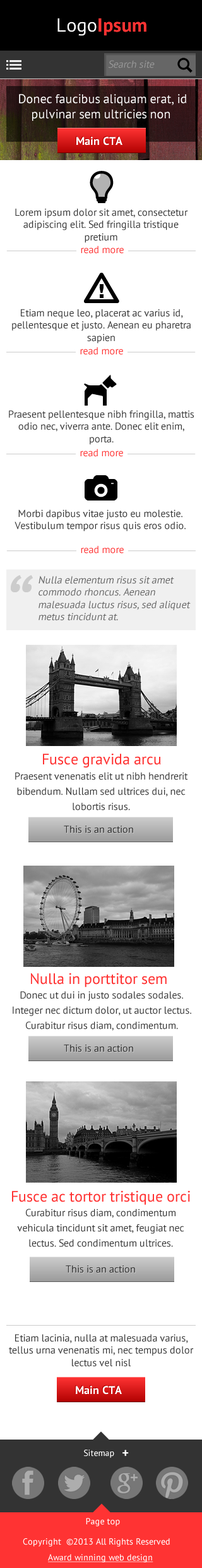
<style>
.page{position:relative;width:202px;height:1568px;background:#ffffff}
.page>*{position:absolute;margin:0}
.t1{font:10.1px "PTSans-Regular";color:#999999;font-style:italic}
.t2{font:12.7px/15.2px "PTSans-Regular";color:#ffffff}
.t3{font:10.1px/12.1px "PTSans-Regular";color:#333333}
.t4{font:10.1px "PTSans-Regular";color:#ff3333}
.t5{font:10.1px/12.1px "PTSans-Regular";color:#666666;font-style:italic}
.t6{font:15.2px "PTSans-Regular";color:#ff3333}
.t7{font:10.1px/15.2px "PTSans-Regular";color:#333333}
.t8{font:8.9px "PTSans-Regular";color:#ffffff}
.t9{font:8.9px "PTSans-Regular";color:#ffffff;text-decoration:underline}
</style>
<div class="page">
<p class="t1" style="left:108px;top:60px;width:47px;height:8px">Search site</p>
<p class="t2" style="left:19px;top:94px;width:168px;height:27px;text-align:center">Donec faucibus aliquam erat, id pulvinar sem ultricies non</p>
<p class="t3" style="left:15px;top:208px;width:174px;height:35px;text-align:center">Lorem ipsum dolor sit amet, consectetur adipiscing elit. Sed fringilla tristique pretium</p>
<p class="t4" style="left:81px;top:246px;width:43px;height:8px">read more</p>
<p class="t3" style="left:12px;top:309px;width:179px;height:35px;text-align:center">Etiam neque leo, placerat ac varius id, pellentesque et justo. Aenean eu pharetra sapien</p>
<p class="t4" style="left:80px;top:347px;width:43px;height:8px">read more</p>
<p class="t3" style="left:9px;top:410px;width:185px;height:35px;text-align:center">Praesent pellentesque nibh fringilla, mattis odio nec, viverra ante. Donec elit enim, porta.</p>
<p class="t4" style="left:80px;top:449px;width:43px;height:8px">read more</p>
<p class="t3" style="left:15px;top:509px;width:171px;height:23px;text-align:center">Morbi dapibus vitae justo eu molestie. Vestibulum tempor risus quis eros odio.</p>
<p class="t4" style="left:81px;top:545px;width:43px;height:9px">read more</p>
<p class="t5" style="left:39px;top:576px;width:152px;height:45px">Nulla elementum risus sit amet commodo rhoncus. Aenean malesuada luctus risus, sed aliquet metus tincidunt at.</p>
<p class="t6" style="left:43px;top:754px;width:118px;height:14px">Fusce gravida arcu</p>
<p class="t7" style="left:15px;top:772px;width:174px;height:39px;text-align:center">Praesent venenatis elit ut nibh hendrerit bibendum. Nullam sed ultrices dui, nec lobortis risus.</p>
<p class="t6" style="left:31px;top:973px;width:136px;height:14px">Nulla in porttitor sem</p>
<p class="t7" style="left:13px;top:991px;width:179px;height:40px;text-align:center">Donec ut dui in justo sodales sodales. Integer nec dictum dolor, ut auctor lectus. Curabitur risus diam, condimentum.</p>
<p class="t6" style="left:12px;top:1191px;width:178px;height:14px">Fusce ac tortor tristique orci</p>
<p class="t7" style="left:17px;top:1209px;width:168px;height:38px;text-align:center">Curabitur risus diam, condimentum vehicula tincidunt sit amet, feugiat nec lectus. Sed condimentum ultrices.</p>
<p class="t3" style="left:9px;top:1334px;width:185px;height:33px;text-align:center">Etiam lacinia, nulla at malesuada varius, tellus urna venenatis mi, nec tempus dolor lectus vel nisl</p>
<p class="t8" style="left:86px;top:1518px;width:34px;height:8px">Page top</p>
<p class="t8" style="left:23px;top:1538px;width:147px;height:8px">Copyright  ©2013 All Rights Reserved</p>
<p class="t9" style="left:48px;top:1554px;width:106px;height:8px">Award winning web design</p>
</div>
